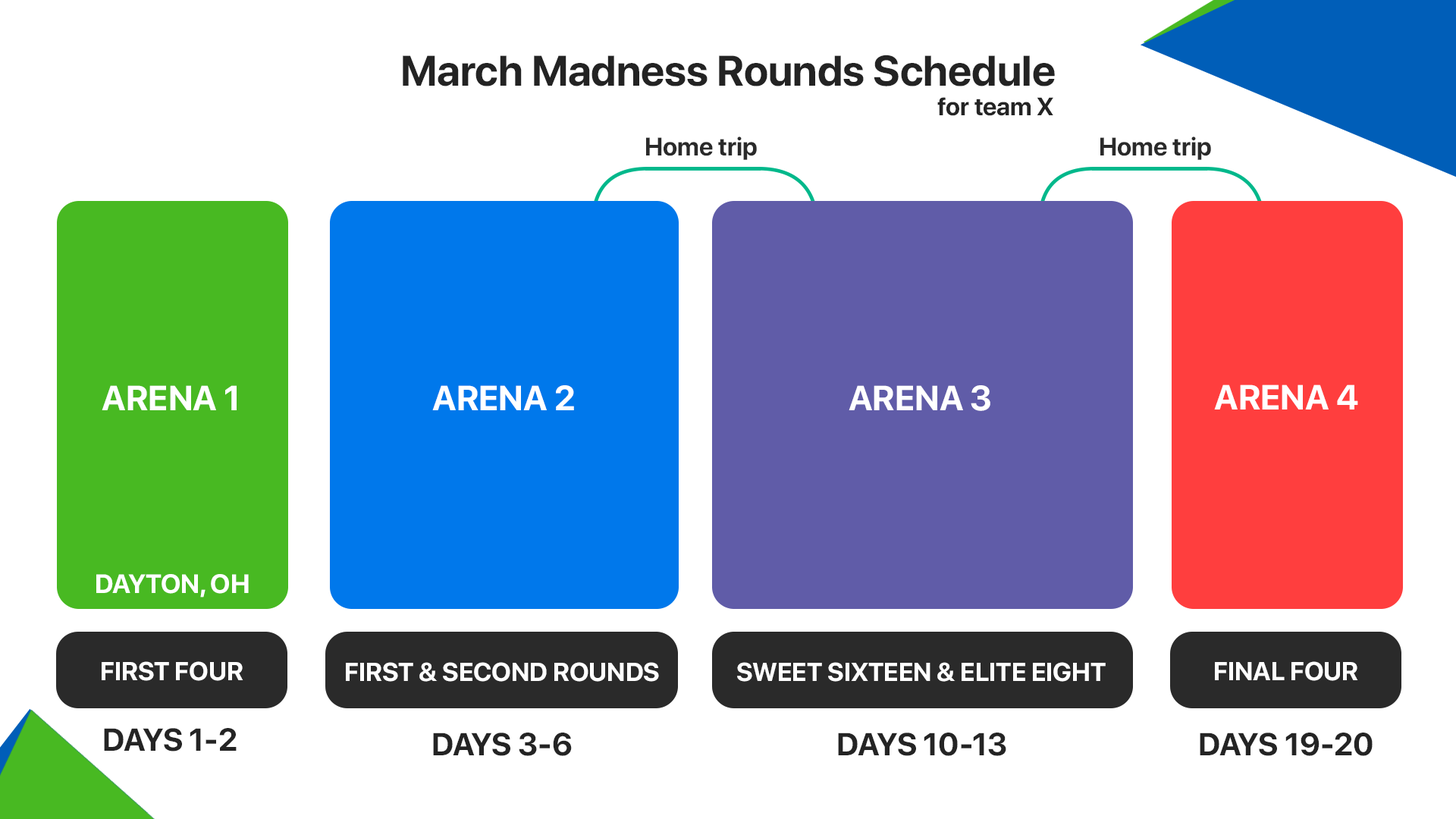
<style>
.page{position:relative;width:1456px;height:819px;background:#ffffff}
.page>*{position:absolute;margin:0}
.t1{font:42.6px "SFProDisplay-Bold";color:#232323}
.t2{font:25px "SFProDisplay-Bold";color:#242424}
.t3{font:25.3px "SFProDisplay-Bold";color:#2a2a2a}
.t4{font:34.8px "SFProDisplay-Bold";color:#ffffff}
.t5{font:26.5px "SFProDisplay-Bold";color:#ffffff}
.t6{font:25.8px "SFProDisplay-Bold";color:#ffffff}
.t7{font:31.6px "SFProDisplay-Bold";color:#242424}
</style>
<div class="page">
<p class="t1" style="left:403px;top:55px;width:652px;height:31px">March Madness Rounds Schedule</p>
<p class="t2" style="left:937px;top:97px;width:116px;height:19px">for team X</p>
<p class="t3" style="left:646px;top:136px;width:111px;height:24px">Home trip</p>
<p class="t3" style="left:1100px;top:136px;width:111px;height:24px">Home trip</p>
<p class="t4" style="left:102px;top:385px;width:135px;height:25px">ARENA 1</p>
<p class="t4" style="left:432px;top:385px;width:142px;height:25px">ARENA 2</p>
<p class="t4" style="left:849px;top:385px;width:141px;height:26px">ARENA 3</p>
<p class="t4" style="left:1214px;top:384px;width:144px;height:25px">ARENA 4</p>
<p class="t5" style="left:96px;top:574px;width:153px;height:24px">DAYTON, OH</p>
<p class="t6" style="left:102px;top:661px;width:141px;height:20px">FIRST FOUR</p>
<p class="t6" style="left:346px;top:662px;width:313px;height:20px">FIRST &amp; SECOND ROUNDS</p>
<p class="t6" style="left:737px;top:662px;width:369px;height:20px">SWEET SIXTEEN &amp; ELITE EIGHT</p>
<p class="t6" style="left:1215px;top:661px;width:143px;height:20px">FINAL FOUR</p>
<p class="t7" style="left:104px;top:728px;width:133px;height:23px">DAYS 1-2</p>
<p class="t7" style="left:433px;top:733px;width:139px;height:23px">DAYS 3-6</p>
<p class="t7" style="left:838px;top:733px;width:168px;height:23px">DAYS 10-13</p>
<p class="t7" style="left:1200px;top:733px;width:173px;height:23px">DAYS 19-20</p>
</div>
